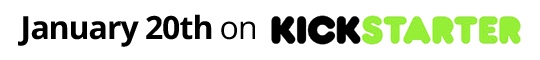
<style>
.page{position:relative;width:540px;height:60px;background:#ffffff}
.page>*{position:absolute;margin:0}
.t1{font:32px "OpenSans-Bold";letter-spacing:-0.03em;color:#000000}
.t2{font:32px "OpenSans";letter-spacing:-0.03em;color:#000000}
</style>
<div class="page">
<p class="t1" style="left:18px;top:14px;width:237px;height:33px">January 20th <span class="t2">on</span></p>
</div>
